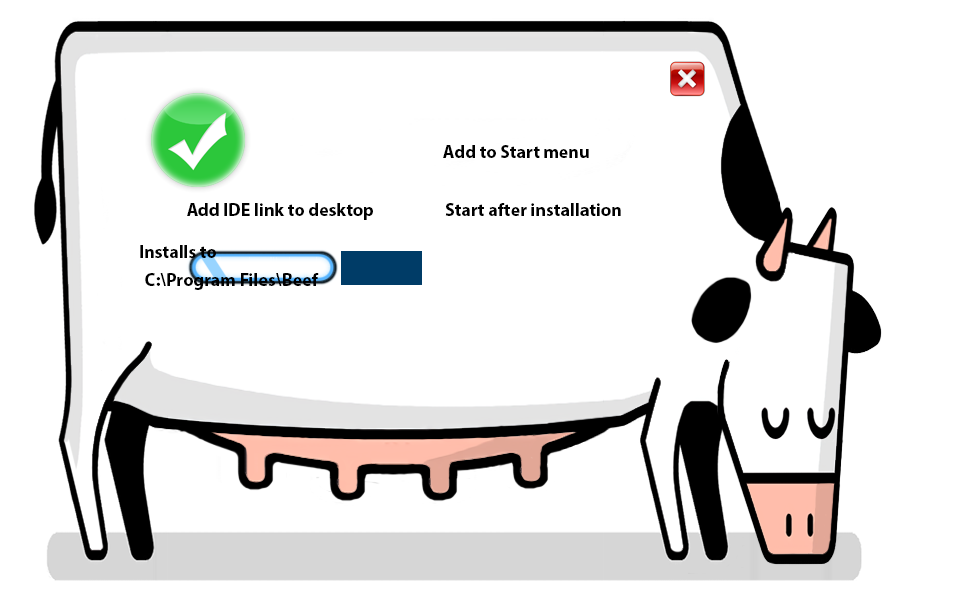
<style>
.page{position:relative;width:960px;height:600px;background:#ffffff}
.page>*{position:absolute;margin:0}
.t1{font:18px "MyriadPro-Bold";color:#000000}
</style>
<div class="page">
<p class="t1" style="left:443px;top:145px;width:146px;height:13px">Add to Start menu</p>
<p class="t1" style="left:187px;top:203px;width:186px;height:17px">Add IDE link to desktop</p>
<p class="t1" style="left:445px;top:203px;width:176px;height:13px">Start after installation</p>
<p class="t1" style="left:140px;top:245px;width:76px;height:13px">Installs to</p>
<p class="t1" style="left:145px;top:273px;width:174px;height:17px">C:\Program Files\Beef</p>
</div>
